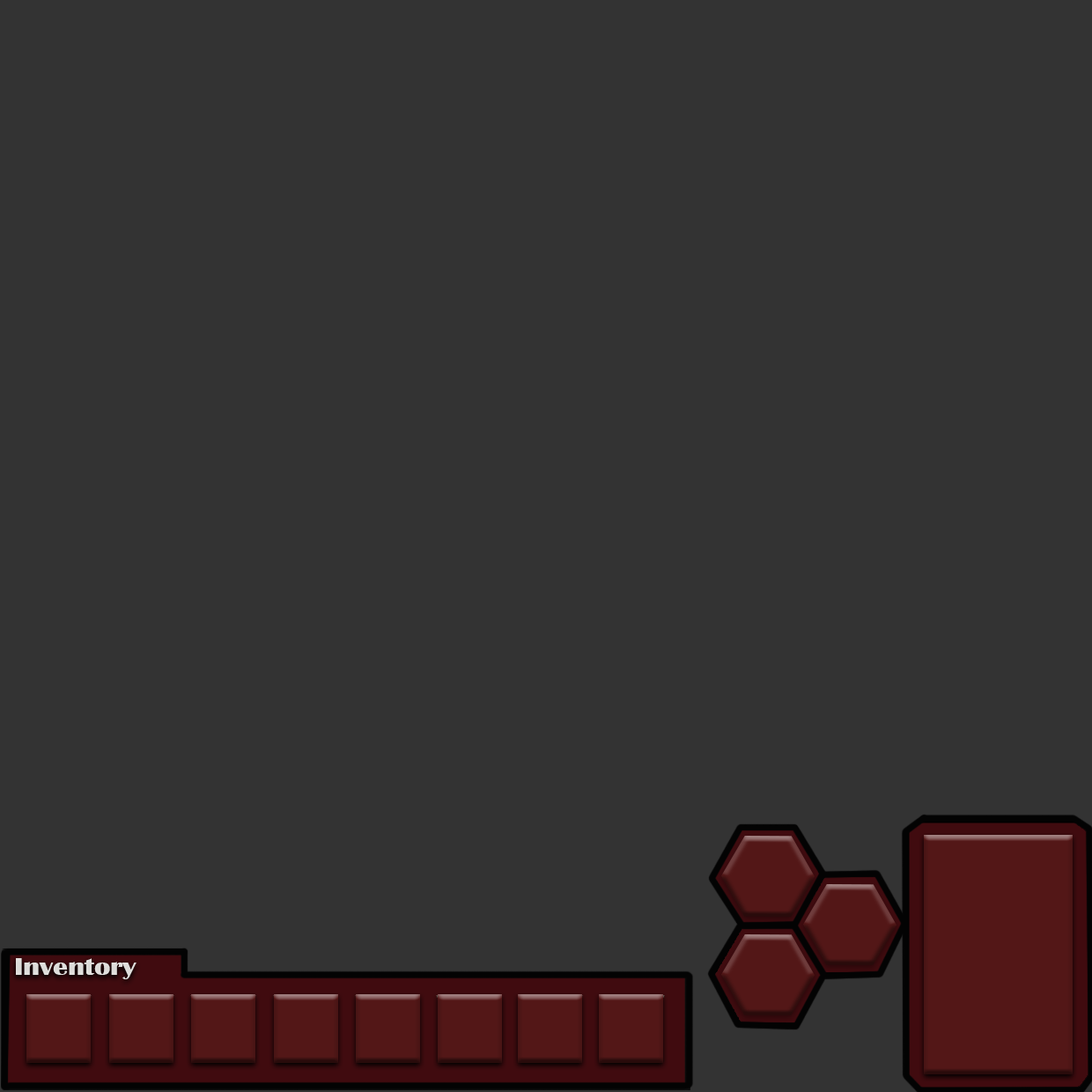
<style>
.page{position:relative;width:1092px;height:1092px;background:#333333}
.page>*{position:absolute;margin:0}
.t1{font:24.7px "BritannicBold";color:#d3d1cd;scale:1.2 1}
</style>
<div class="page">
<p class="t1" style="left:16px;top:958px;width:120px;height:21px">Inventory</p>
</div>
